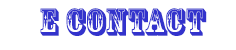
<style>
.page{position:relative;width:236px;height:50px;background:#ffffff}
.page>*{position:absolute;margin:0}
.t1{font:36px "RosewoodStd-Regular";color:#3333cc}
</style>
<div class="page">
<p class="t1" style="left:40px;top:8px;width:167px;height:28px">E CONTACT</p>
</div>
